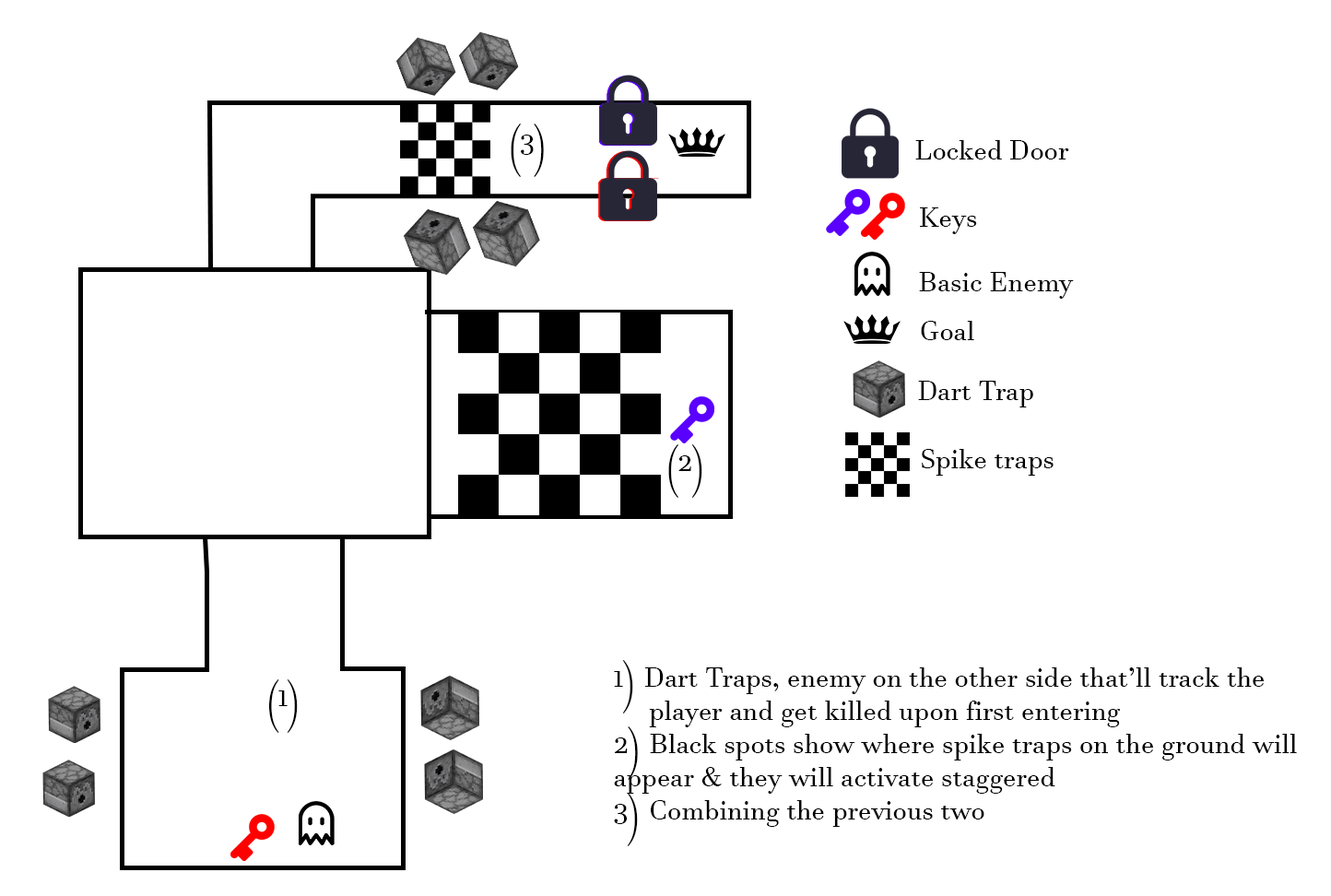
<style>
.page{position:relative;width:1331px;height:896px;background:#ffffff}
.page>*{position:absolute;margin:0}
.t1{font:27.7px "JavaneseText";color:#000000}
</style>
<div class="page">
<p class="t1" style="left:511px;top:124px;width:33px;height:53px">(3)</p>
<p class="t1" style="left:915px;top:140px;width:154px;height:19px">Locked Door</p>
<p class="t1" style="left:920px;top:207px;width:57px;height:27px">Keys</p>
<p class="t1" style="left:919px;top:272px;width:155px;height:27px">Basic Enemy</p>
<p class="t1" style="left:921px;top:321px;width:53px;height:19px">Goal</p>
<p class="t1" style="left:918px;top:381px;width:115px;height:26px">Dart Trap</p>
<p class="t1" style="left:668px;top:444px;width:34px;height:54px">(2)</p>
<p class="t1" style="left:922px;top:449px;width:132px;height:27px">Spike traps</p>
<p class="t1" style="left:614px;top:660px;width:683px;height:186px">1) Dart Traps, enemy on the other side that’ll track the <br>     player and get killed upon first entering<br>2) Black spots show where spike traps on the ground will <br>appear &amp; they will activate staggered<br>3) Combining the previous two</p>
<p class="t1" style="left:269px;top:679px;width:29px;height:54px">(1)</p>
</div>
